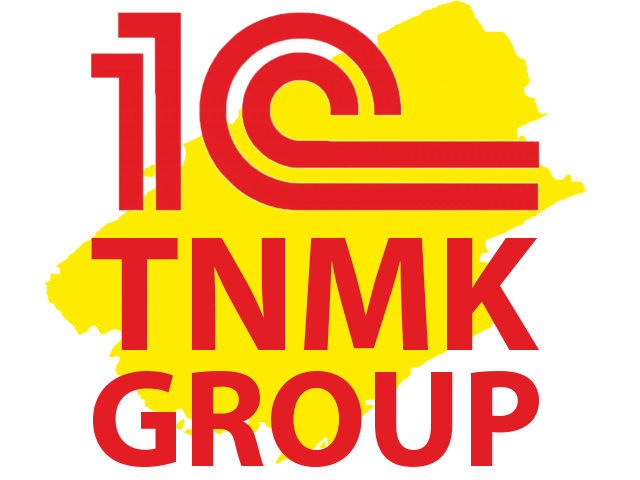
<style>
.page{position:relative;width:640px;height:480px;background:#ffffff}
.page>*{position:absolute;margin:0}
.t1{font:166.7px "MyriadPro-Bold";color:#e31d24}
.t2{font:140px "MyriadPro-Bold";color:#e31d24}
</style>
<div class="page">
<p class="t1" style="left:91px;top:237px;width:449px;height:113px">TNMK</p>
<p class="t2" style="left:93px;top:371px;width:446px;height:96px"><span class="t1"> </span>GROUP</p>
</div>
